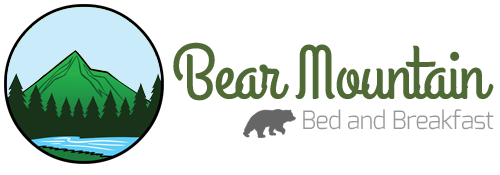
<style>
.page{position:relative;width:500px;height:175px;background:#ffffff}
.page>*{position:absolute;margin:0}
.t1{font:75px "GrandHotel-Regular";letter-spacing:-0.023em;color:#4f6a35}
.t2{font:25px "Exo-Light";letter-spacing:-0.023em;color:#999999}
</style>
<div class="page">
<p class="t1" style="left:173px;top:42px;width:321px;height:59px">Bear Mountain</p>
<p class="t2" style="left:303px;top:109px;width:191px;height:21px">Bed and Breakfast</p>
</div>
